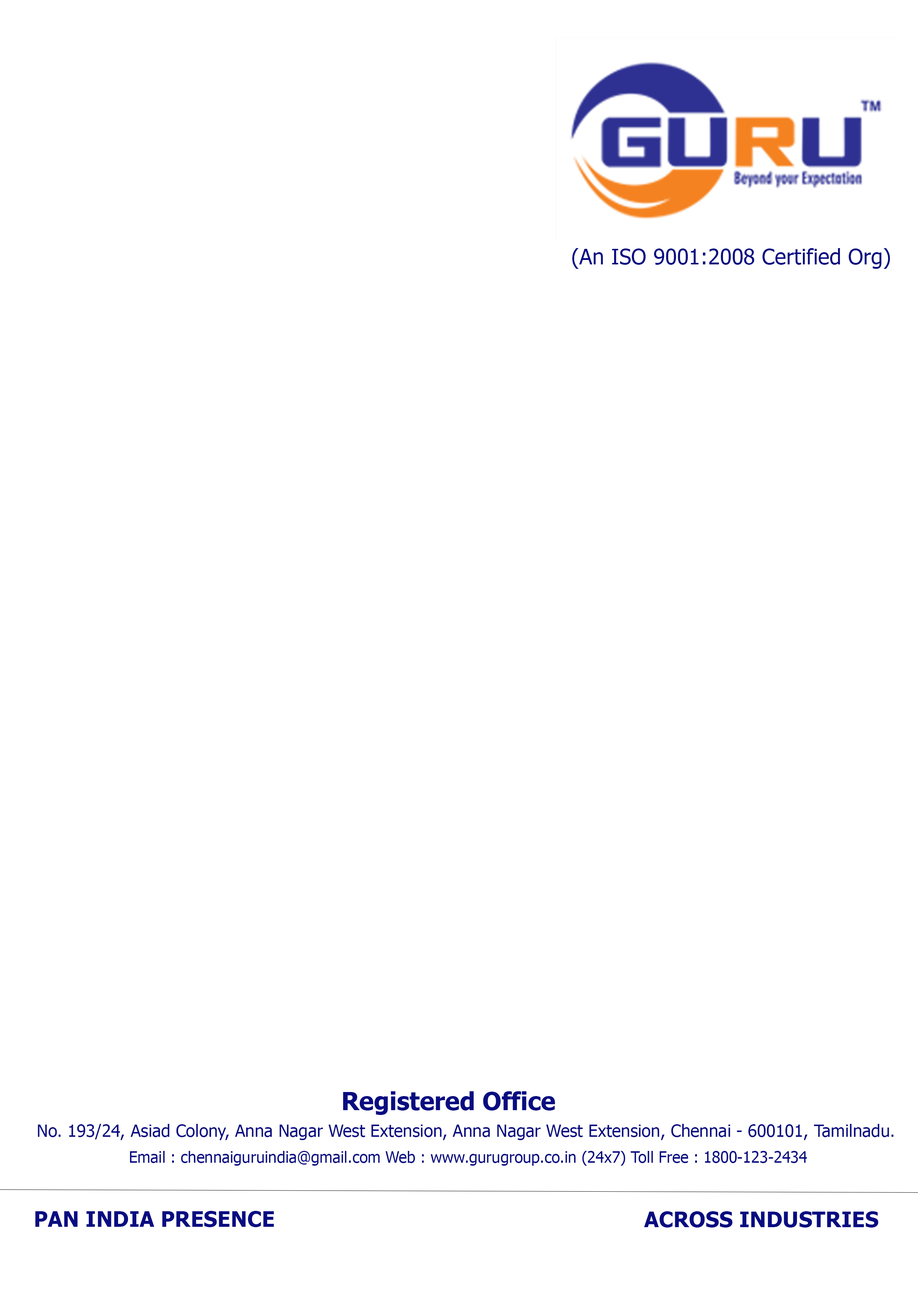
<style>
.page{position:relative;width:918px;height:1299px;background:#ffffff}
.page>*{position:absolute;margin:0}
.t1{font:21.6px "Tahoma";color:#080c81}
.t2{font:24.7px "Tahoma-Bold";color:#080c81}
.t3{font:17px "Tahoma";color:#080c81}
.t4{font:15.4px "Tahoma";color:#080c81}
.t5{font:21.6px "Tahoma-Bold";color:#080c81}
</style>
<div class="page">
<p class="t1" style="left:572px;top:248px;width:318px;height:21px">(An ISO 9001:2008 Certified Org)</p>
<p class="t2" style="left:343px;top:1091px;width:212px;height:24px">Registered Office</p>
<p class="t3" style="left:38px;top:1124px;width:856px;height:16px">No. 193/24, Asiad Colony, Anna Nagar West Extension, Anna Nagar West Extension, Chennai - 600101, Tamilnadu.</p>
<p class="t4" style="left:130px;top:1151px;width:677px;height:14px">Email : chennaiguruindia@gmail.com Web : www.gurugroup.co.in (24x7) Toll Free : 1800-123-2434</p>
<p class="t5" style="left:35px;top:1211px;width:239px;height:16px">PAN INDIA PRESENCE</p>
<p class="t5" style="left:644px;top:1211px;width:235px;height:16px">ACROSS INDUSTRIES</p>
</div>
